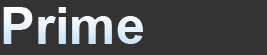
<style>
.page{position:relative;width:267px;height:55px;background:#333333}
.page>*{position:absolute;margin:0}
.t1{font:52px "Arial-BoldMT";color:#e8f3fd}
</style>
<div class="page">
<p class="t1" style="left:3px;top:7px;width:140px;height:37px">Prime</p>
</div>
